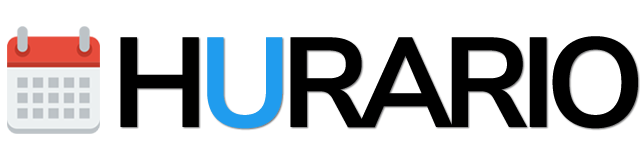
<style>
.page{position:relative;width:640px;height:160px;background:#ffffff}
.page>*{position:absolute;margin:0}
.t1{font:127px "NunitoSans-Bold";letter-spacing:-0.08em;color:#000000}
.t2{font:127px "NunitoSans-Bold";letter-spacing:-0.08em;color:#209cee}
</style>
<div class="page">
<p class="t1" style="left:120px;top:36px;width:518px;height:93px">H<span class="t2">U</span>RARIO</p>
</div>
